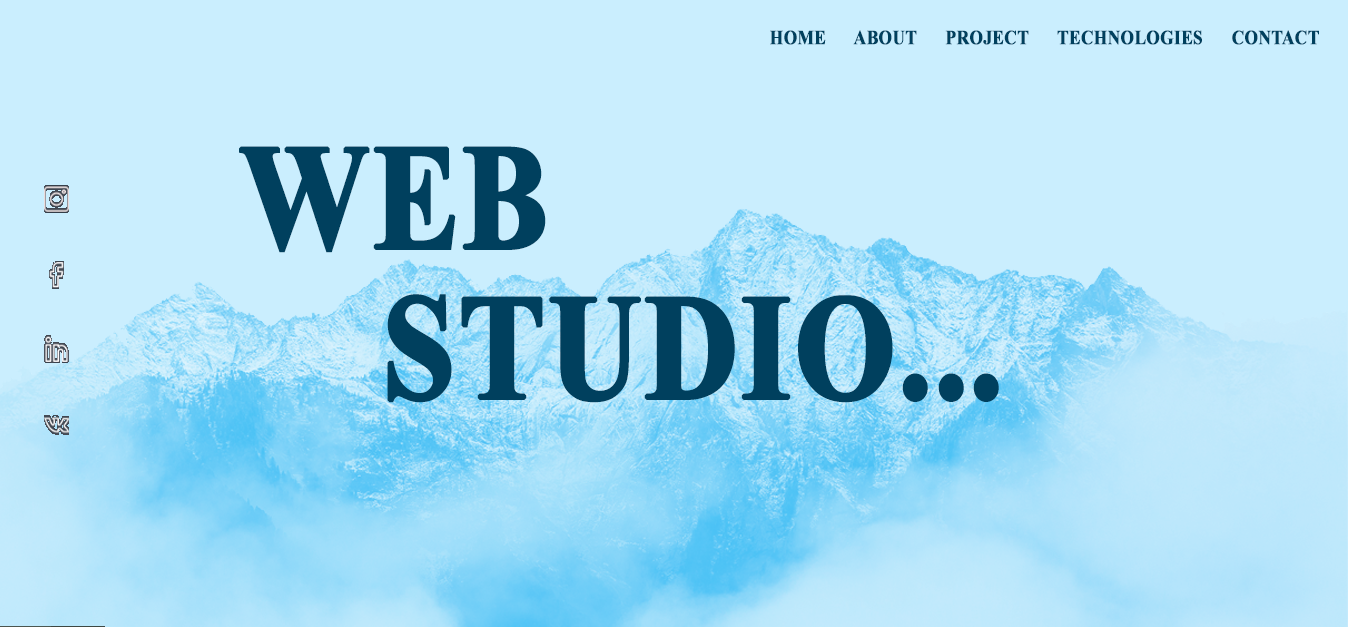
<style>
.page{position:relative;width:1348px;height:627px;background:#caeefe}
.page>*{position:absolute;margin:0}
.t1{font:20px "TimesNewRomanPS-BoldMT";color:#00405e;font-weight:bold;scale:0.86 1}
.t2{font:150px/150px "TimesNewRomanPS-BoldMT";color:#00405e;font-weight:bold;scale:0.86 1}
</style>
<div class="page">
<p class="t1" style="left:770px;top:30px;width:549px;height:15px">HOME      ABOUT      PROJECT      TECHNOLOGIES      CONTACT</p>
<p class="t2" style="left:239px;top:146px;width:760px;height:257px">WEB<br>    STUDIO...</p>
</div>
